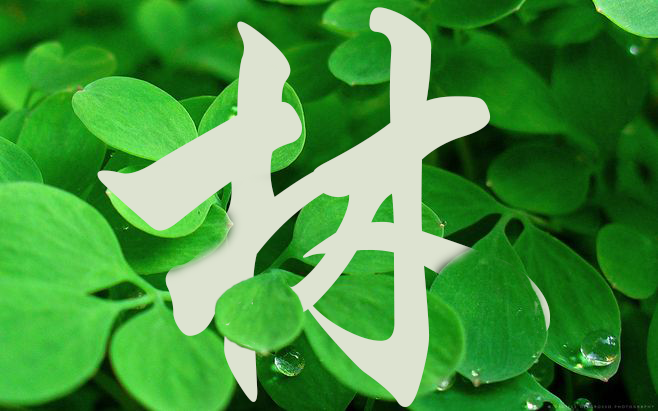
<style>
.page{position:relative;width:658px;height:411px}
.page>*{position:absolute;margin:0}
.t1{font:508.3px "STXingkai";letter-spacing:0.18em;color:#dde3d1}
</style>
<div class="page">
<p class="t1" style="left:97px;top:7px;width:453px;height:400px">林</p>
</div>
